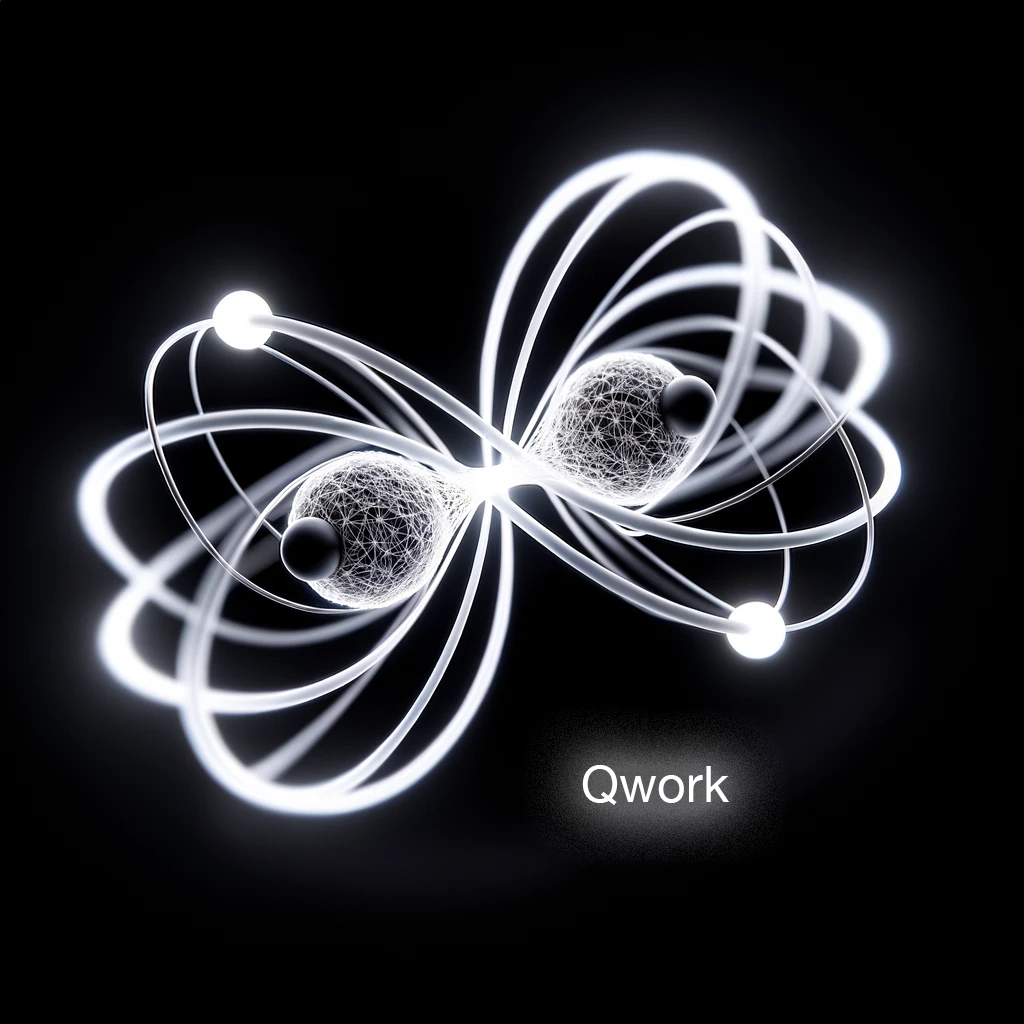
<style>
.page{position:relative;width:1024px;height:1024px;background:#000000}
.page>*{position:absolute;margin:0}
.t1{font:50px "HelveticaNeue";color:#ffffff}
</style>
<div class="page">
<p class="t1" style="left:582px;top:765px;width:147px;height:40px">Qwork</p>
</div>
